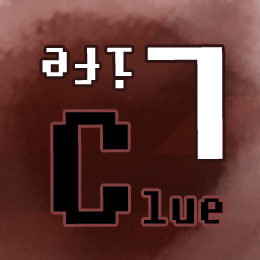
<style>
.page{position:relative;width:260px;height:260px}
.page>*{position:absolute;margin:0}
.t1{font:51.7px "Fixedsys";color:#ffffff}
.t2{font:158.7px "Fixedsys";color:#ffffff}
.t3{font:45.7px "Fixedsys";color:#000000}
.t4{font:158.7px "Fixedsys";color:#000000}
</style>
<div class="page">
<p class="t1" style="left:42px;top:47px;width:181px;height:112px;rotate:180deg"><span class="t2">L</span>ife</p>
<p class="t3" style="left:53px;top:112px;width:170px;height:112px"><span class="t4">C</span>lue</p>
</div>
